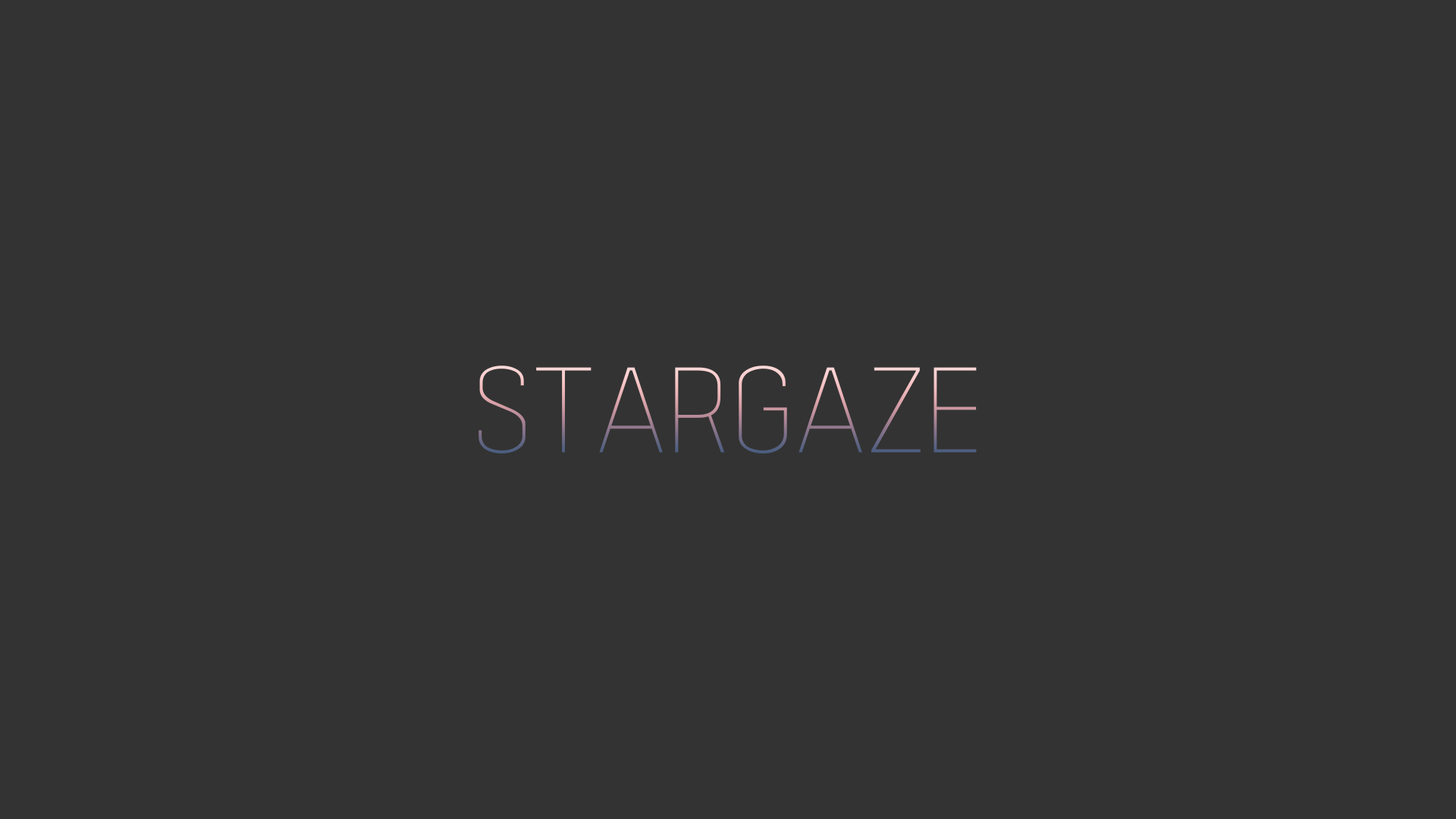
<style>
.page{position:relative;width:1456px;height:819px;background:#333333}
.page>*{position:absolute;margin:0}
.t1{font:94.8px "KoreanYNSJG1-R"}
</style>
<div class="page">
<p class="t1" style="left:479px;top:366px;width:498px;height:87px">STARGAZE</p>
</div>
